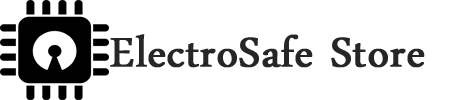
<style>
.page{position:relative;width:450px;height:100px;background:#ffffff}
.page>*{position:absolute;margin:0}
.t1{font:60px "DaunPenh";color:#262626;font-weight:bold}
</style>
<div class="page">
<p class="t1" style="left:110px;top:34px;width:315px;height:34px">ElectroSafe Store</p>
</div>
